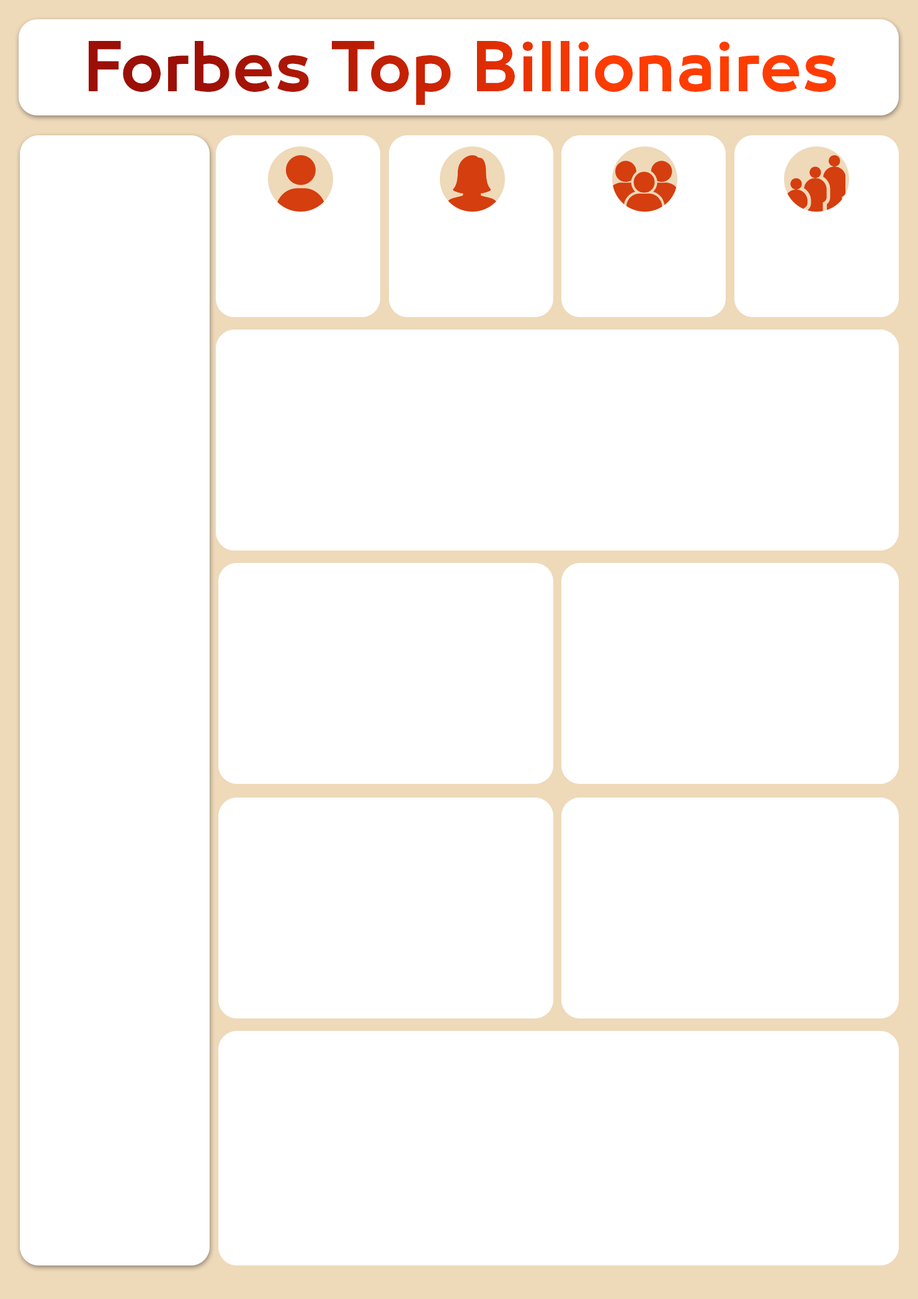
<style>
.page{position:relative;width:918px;height:1299px;background:#ffffff}
.page>*{position:absolute;margin:0}
.t1{font:62px "29LTBukra-Medium"}
</style>
<div class="page">
<p class="t1" style="left:89px;top:41px;width:747px;height:64px">Forbes Top Billionaires</p>
</div>
